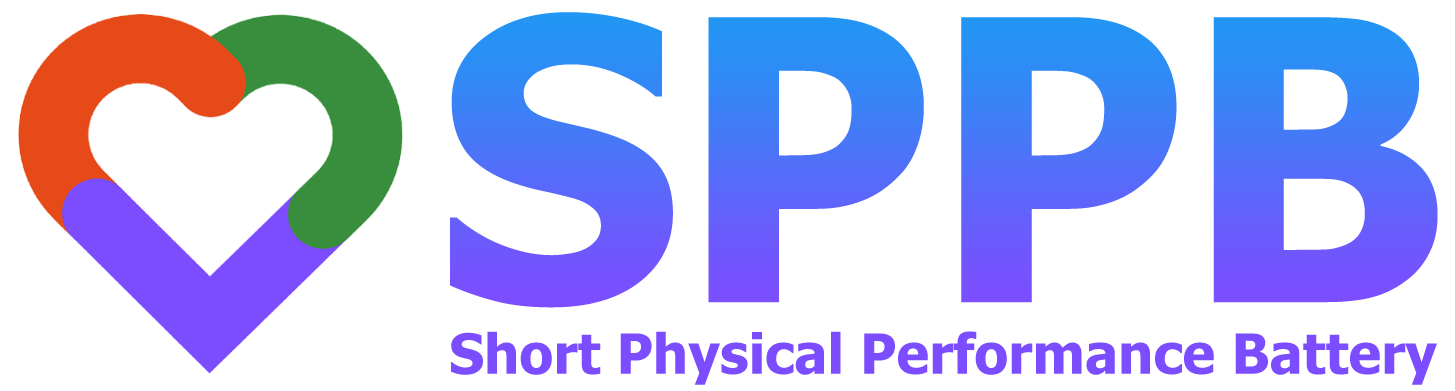
<style>
.page{position:relative;width:1455px;height:391px;background:#ffffff}
.page>*{position:absolute;margin:0}
.t1{font:391.4px "Tahoma-Bold"}
.t2{font:55.4px "Tahoma-Bold";color:#7c4dff}
</style>
<div class="page">
<p class="t1" style="left:450px;top:12px;width:988px;height:296px">SPPB</p>
<p class="t2" style="left:451px;top:331px;width:986px;height:54px">Short Physical Performance Battery</p>
</div>
